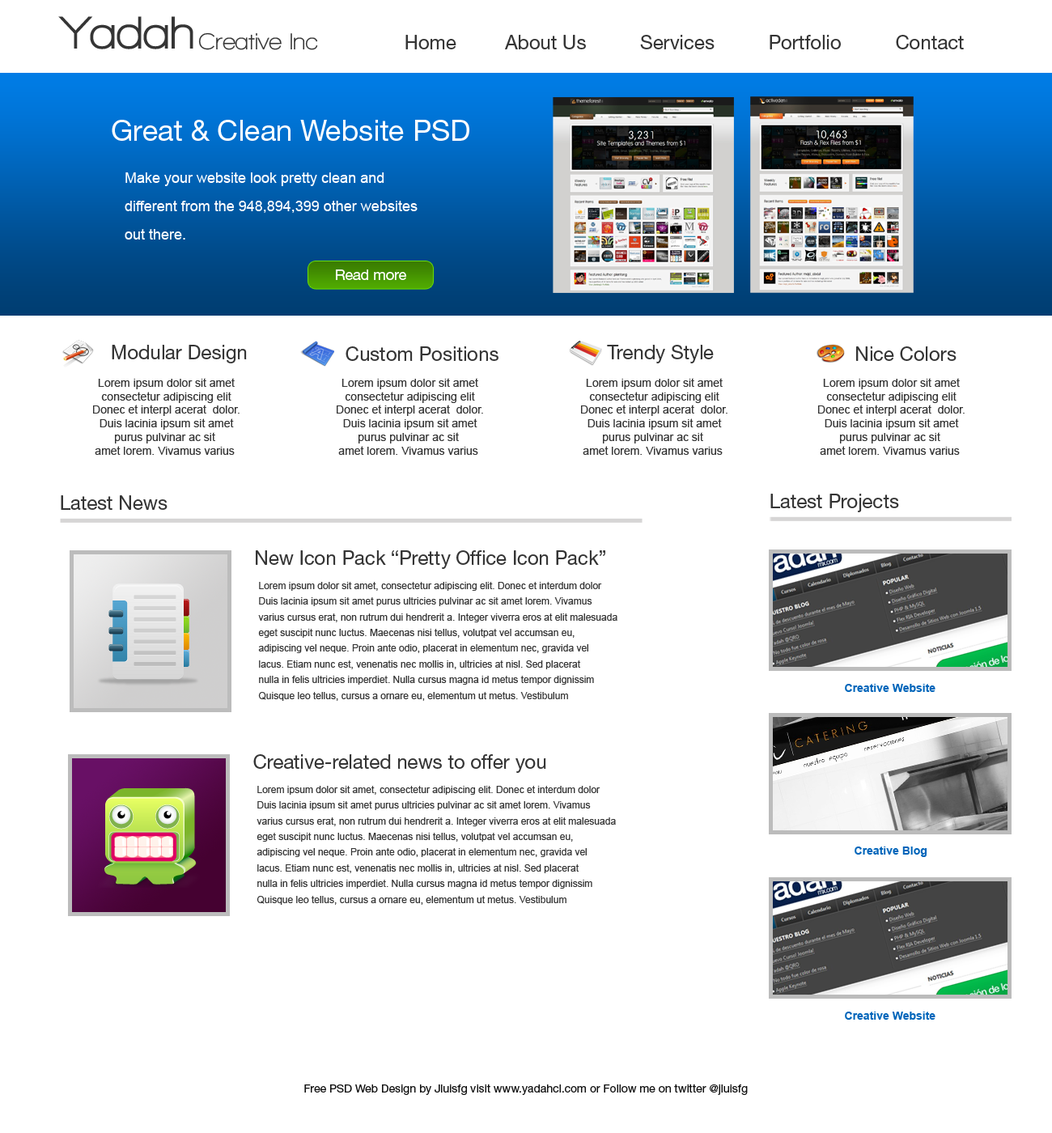
<style>
.page{position:relative;width:1052px;height:1133px;background:#ffffff}
.page>*{position:absolute;margin:0}
.t1{font:47.3px "WalkwayUltraBold";color:#353535}
.t2{font:23.6px "WalkwayBold";color:#353535}
.t3{font:19.4px "HelveticaNeueLTStd-Roman";color:#353535}
.t4{font:29.1px "HelveticaNeueLTStd-Roman";color:#ffffff}
.t5{font:14.6px/28.3px "ArialMT";color:#ffffff}
.t6{font:14.6px "HelveticaNeueLTStd-Roman";color:#ffffff}
.t7{font:11.3px "ArialMT";color:#353535}
.t8{font:9.7px "ArialMT";color:#353535}
.t9{font:11.3px "Arial-BoldMT";color:#0065ba}
.t10{font:11.3px "HelveticaNeueLTStd-Roman";color:#111111}
</style>
<div class="page">
<p class="t1" style="left:58px;top:16px;width:135px;height:33px">Yadah</p>
<p class="t2" style="left:198px;top:32px;width:120px;height:18px">Creative Inc</p>
<p class="t3" style="left:406px;top:35px;width:558px;height:14px">Home         About Us          Services          Portfolio          Contact</p>
<p class="t4" style="left:112px;top:120px;width:357px;height:21px">Great &amp; Clean Website PSD</p>
<p class="t5" style="left:125px;top:172px;width:293px;height:68px">Make your website look pretty clean and <br>different from the 948,894,399 other websites<br>out there.</p>
<p class="t6" style="left:336px;top:270px;width:70px;height:10px">Read more</p>
<p class="t3" style="left:112px;top:345px;width:135px;height:18px">Modular Design</p>
<p class="t3" style="left:346px;top:346px;width:153px;height:15px">Custom Positions</p>
<p class="t3" style="left:607px;top:345px;width:107px;height:18px">Trendy Style</p>
<p class="t3" style="left:856px;top:346px;width:101px;height:15px">Nice Colors</p>
<p class="t7" style="left:93px;top:378px;width:147px;height:77px;text-align:center">Lorem ipsum dolor sit amet<br>consectetur adipiscing elit<br>Donec et interpl acerat  dolor.<br>Duis lacinia ipsum sit amet<br>purus pulvinar ac sit <br>amet lorem. Vivamus varius</p>
<p class="t7" style="left:337px;top:378px;width:146px;height:77px;text-align:center">Lorem ipsum dolor sit amet<br>consectetur adipiscing elit<br>Donec et interpl acerat  dolor.<br>Duis lacinia ipsum sit amet<br>purus pulvinar ac sit <br>amet lorem. Vivamus varius</p>
<p class="t7" style="left:581px;top:378px;width:147px;height:77px;text-align:center">Lorem ipsum dolor sit amet<br>consectetur adipiscing elit<br>Donec et interpl acerat  dolor.<br>Duis lacinia ipsum sit amet<br>purus pulvinar ac sit <br>amet lorem. Vivamus varius</p>
<p class="t7" style="left:818px;top:378px;width:147px;height:77px;text-align:center">Lorem ipsum dolor sit amet<br>consectetur adipiscing elit<br>Donec et interpl acerat  dolor.<br>Duis lacinia ipsum sit amet<br>purus pulvinar ac sit <br>amet lorem. Vivamus varius</p>
<p class="t3" style="left:61px;top:495px;width:107px;height:15px">Latest News</p>
<p class="t3" style="left:771px;top:494px;width:128px;height:18px">Latest Projects</p>
<p class="t3" style="left:256px;top:550px;width:349px;height:19px">New Icon Pack “Pretty Office Icon Pack”</p>
<p class="t8" style="left:258px;top:582px;width:360px;height:119px">Lorem ipsum dolor sit amet, consectetur adipiscing elit. Donec et interdum dolor<br>Duis lacinia ipsum sit amet purus ultricies pulvinar ac sit amet lorem. Vivamus <br>varius cursus erat, non rutrum dui hendrerit a. Integer viverra eros at elit malesuada <br>eget suscipit nunc luctus. Maecenas nisi tellus, volutpat vel accumsan eu, <br>adipiscing vel neque. Proin ante odio, placerat in elementum nec, gravida vel <br>lacus. Etiam nunc est, venenatis nec mollis in, ultricies at nisl. Sed placerat <br>nulla in felis ultricies imperdiet. Nulla cursus magna id metus tempor dignissim<br>Quisque leo tellus, cursus a ornare eu, elementum ut metus. Vestibulum</p>
<p class="t9" style="left:845px;top:684px;width:91px;height:8px">Creative Website</p>
<p class="t3" style="left:253px;top:754px;width:293px;height:19px">Creative-related news to offer you</p>
<p class="t8" style="left:257px;top:786px;width:359px;height:119px">Lorem ipsum dolor sit amet, consectetur adipiscing elit. Donec et interdum dolor<br>Duis lacinia ipsum sit amet purus ultricies pulvinar ac sit amet lorem. Vivamus <br>varius cursus erat, non rutrum dui hendrerit a. Integer viverra eros at elit malesuada <br>eget suscipit nunc luctus. Maecenas nisi tellus, volutpat vel accumsan eu, <br>adipiscing vel neque. Proin ante odio, placerat in elementum nec, gravida vel <br>lacus. Etiam nunc est, venenatis nec mollis in, ultricies at nisl. Sed placerat <br>nulla in felis ultricies imperdiet. Nulla cursus magna id metus tempor dignissim<br>Quisque leo tellus, cursus a ornare eu, elementum ut metus. Vestibulum</p>
<p class="t9" style="left:855px;top:847px;width:73px;height:10px">Creative Blog</p>
<p class="t9" style="left:845px;top:1012px;width:91px;height:8px">Creative Website</p>
<p class="t10" style="left:304px;top:1084px;width:444px;height:11px">Free PSD Web Design by Jluisfg visit www.yadahcl.com or Follow me on twitter @jluisfg</p>
</div>
